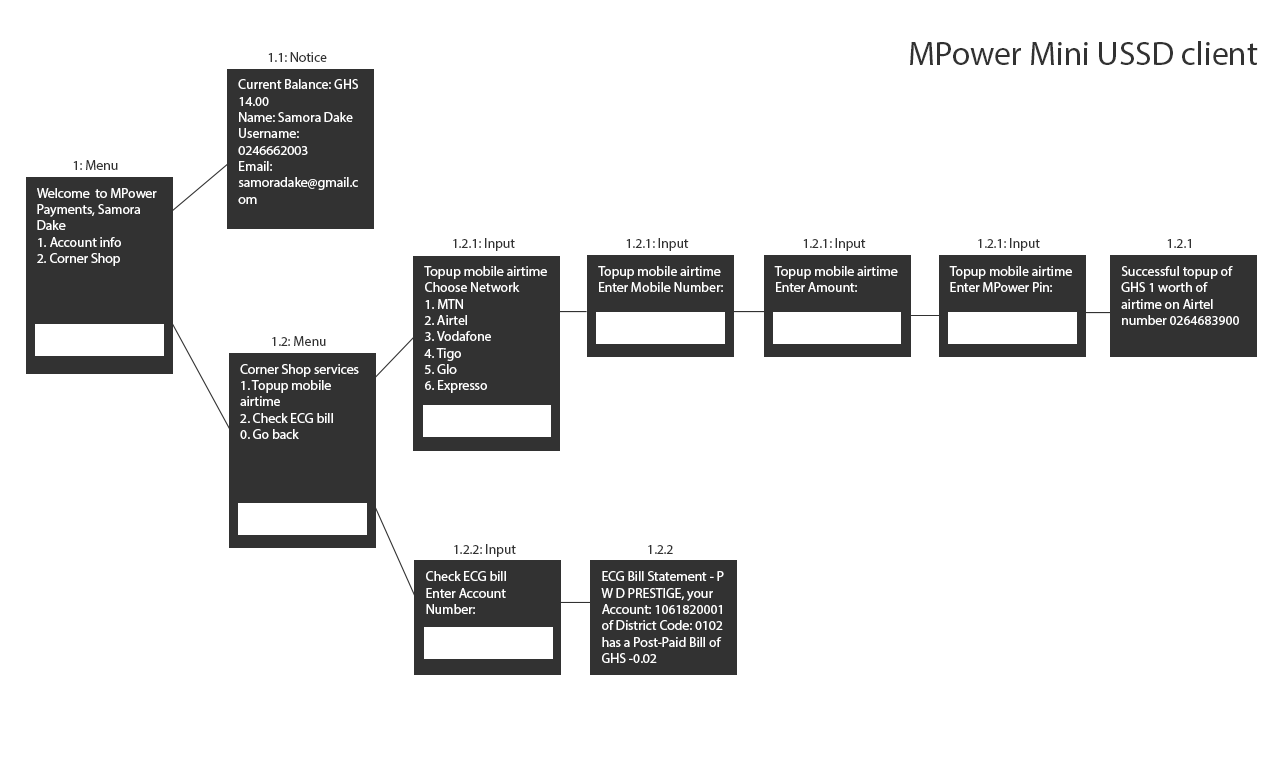
<style>
.page{position:relative;width:1280px;height:768px;background:#ffffff}
.page>*{position:absolute;margin:0}
.t1{font:33.3px "MyriadPro-Regular";color:#323232}
.t2{font:13.6px "MyriadPro-Regular";color:#323232}
.t3{font:13.6px "MyriadPro-Regular";color:#ffffff}
</style>
<div class="page">
<p class="t1" style="left:910px;top:41px;width:348px;height:24px">MPower Mini USSD client</p>
<p class="t2" style="left:268px;top:52px;width:59px;height:10px">1.1: Notice</p>
<p class="t3" style="left:238px;top:79px;width:120px;height:125px">Current Balance: GHS 14.00<br>Name: Samora Dake<br>Username: 0246662003<br>Email: samoradake@gmail.com</p>
<p class="t2" style="left:73px;top:160px;width:45px;height:10px">1: Menu</p>
<p class="t3" style="left:37px;top:188px;width:120px;height:78px">Welcome  to MPower Payments, Samora Dake<br>1. Account info<br>2. Corner Shop</p>
<p class="t2" style="left:453px;top:238px;width:62px;height:13px">1.2.1: Input</p>
<p class="t2" style="left:626px;top:238px;width:63px;height:13px">1.2.1: Input</p>
<p class="t2" style="left:803px;top:238px;width:63px;height:13px">1.2.1: Input</p>
<p class="t2" style="left:978px;top:238px;width:62px;height:13px">1.2.1: Input</p>
<p class="t2" style="left:1167px;top:239px;width:24px;height:9px">1.2.1</p>
<p class="t3" style="left:424px;top:266px;width:123px;height:127px">Topup mobile airtime<br>Choose Network<br>1. MTN<br>2. Airtel<br>3. Vodafone<br>4. Tigo<br>5. Glo<br>6. Expresso</p>
<p class="t3" style="left:598px;top:266px;width:125px;height:26px">Topup mobile airtime<br>Enter Mobile Number:</p>
<p class="t3" style="left:774px;top:266px;width:124px;height:26px">Topup mobile airtime<br>Enter Amount:</p>
<p class="t3" style="left:949px;top:266px;width:123px;height:26px">Topup mobile airtime<br>Enter MPower Pin:</p>
<p class="t3" style="left:1121px;top:266px;width:118px;height:59px">Successful topup of GHS 1 worth of airtime on Airtel number 0264683900</p>
<p class="t2" style="left:272px;top:336px;width:54px;height:10px">1.2: Menu</p>
<p class="t3" style="left:240px;top:364px;width:119px;height:75px">Corner Shop services<br>1. Topup mobile airtime<br>2. Check ECG bill<br>0. Go back</p>
<p class="t2" style="left:454px;top:544px;width:62px;height:13px">1.2.2: Input</p>
<p class="t2" style="left:648px;top:545px;width:25px;height:9px">1.2.2</p>
<p class="t3" style="left:426px;top:571px;width:80px;height:43px">Check ECG bill<br>Enter Account Number:</p>
<p class="t3" style="left:601px;top:571px;width:123px;height:92px">ECG Bill Statement - P W D PRESTIGE, your Account: 1061820001 of District Code: 0102 has a Post-Paid Bill of GHS -0.02</p>
</div>
